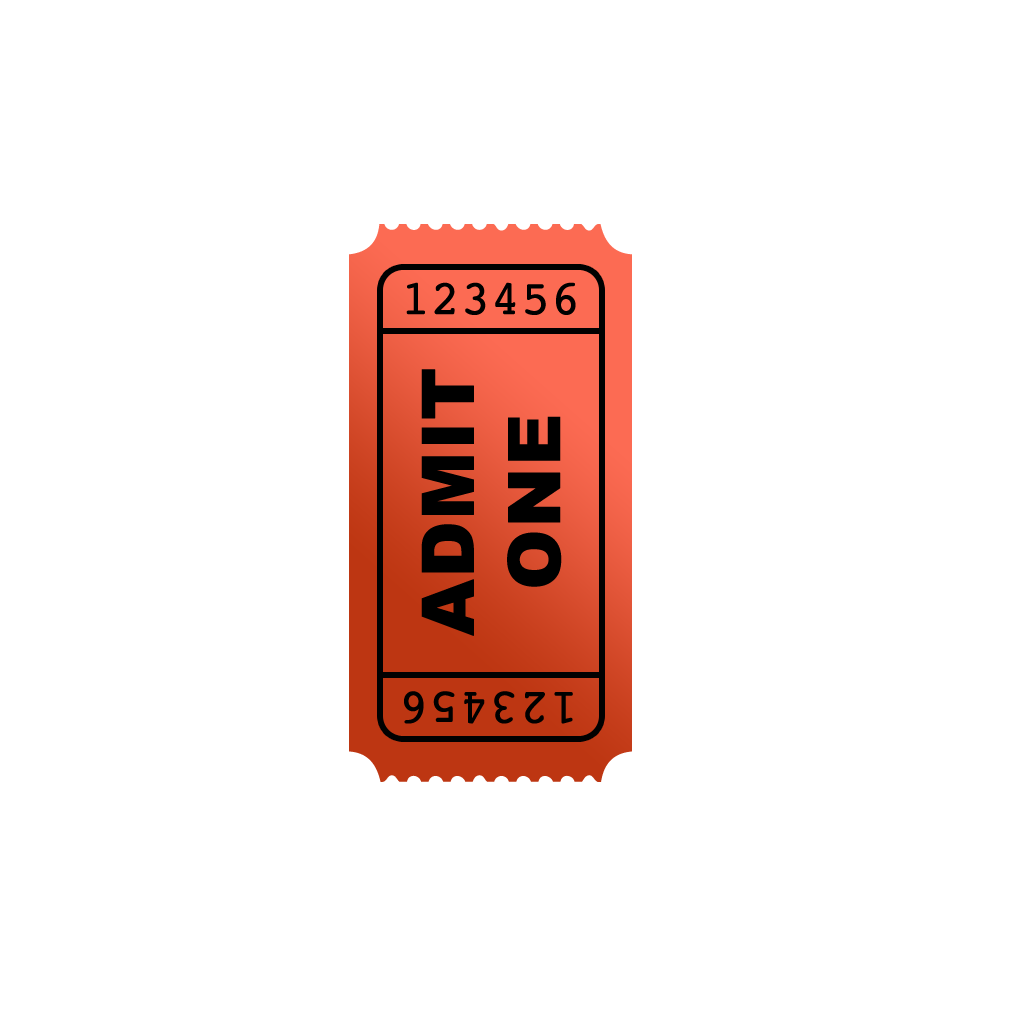
<style>
.page{position:relative;width:1024px;height:1024px;background:#ffffff}
.page>*{position:absolute;margin:0}
.t1{font:48px "Courier";color:#000000;font-weight:bold}
.t2{font:72px "Arial-Black";color:#000000;font-weight:bold}
</style>
<div class="page">
<p class="t1" style="left:406px;top:282px;width:170px;height:33px">123456</p>
<p class="t2" style="left:421px;top:369px;width:141px;height:267px;text-align:center;rotate:-90deg">ADMIT<br>ONE</p>
<p class="t1" style="left:404px;top:691px;width:169px;height:33px;rotate:180deg">123456</p>
</div>
